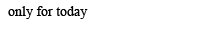
<style>
.page{position:relative;width:200px;height:30px;background:#ffffff}
.page>*{position:absolute;margin:0}
.t1{font:14px "TimesNewRomanPSMT";color:#000000}
</style>
<div class="page">
<p class="t1" style="left:8px;top:6px;width:80px;height:13px">only for today</p>
</div>
